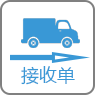
<style>
.page{position:relative;width:95px;height:95px;background:#ffffff}
.page>*{position:absolute;margin:0}
.t1{font:18px "MicrosoftYaHei";color:#3998d6}
</style>
<div class="page">
<p class="t1" style="left:21px;top:66px;width:54px;height:19px">接收单</p>
</div>
